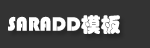
<style>
.page{position:relative;width:150px;height:48px;background:#333333}
.page>*{position:absolute;margin:0}
.t1{font:19.8px "STHupo";letter-spacing:0.005em;color:#ffffff}
</style>
<div class="page">
<p class="t1" style="left:8px;top:15px;width:112px;height:19px">SARADD模板</p>
</div>
